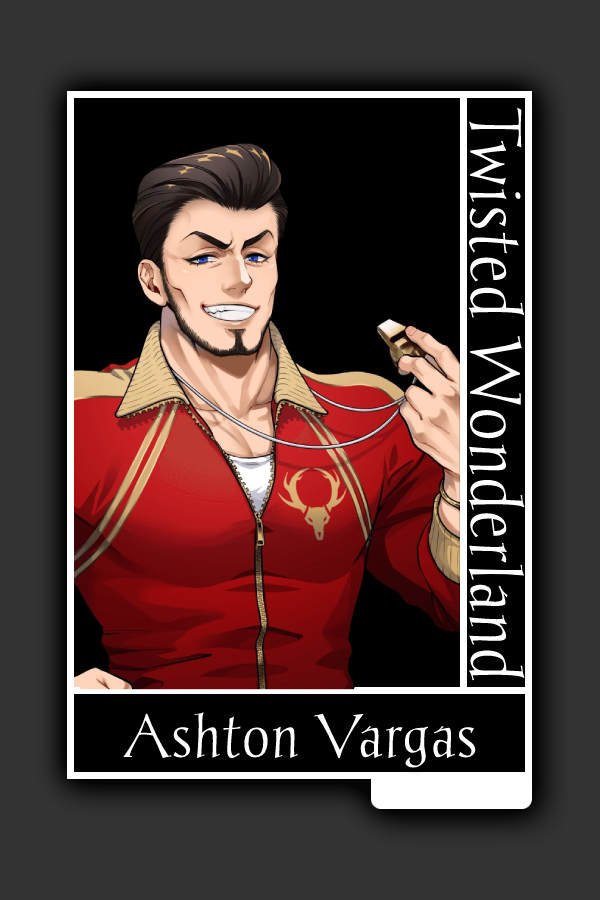
<style>
.page{position:relative;width:600px;height:900px;background:#000000}
.page>*{position:absolute;margin:0}
.t1{font:60px "Chantelli-Antiqua";color:#ffffff}
.t2{font:50px "Chantelli-Antiqua";color:#ffffff}
</style>
<div class="page">
<p class="t1" style="left:468px;top:107px;width:57px;height:574px;rotate:90deg">Twisted Wonderland</p>
<p class="t2" style="left:123px;top:712px;width:353px;height:56px">Ashton Vargas</p>
</div>
